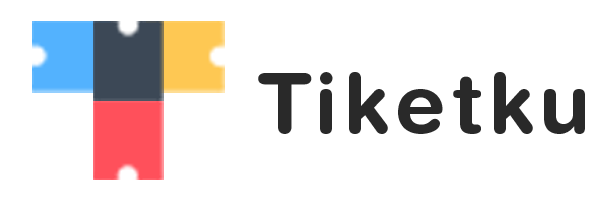
<style>
.page{position:relative;width:600px;height:200px;background:#ffffff}
.page>*{position:absolute;margin:0}
.t1{font:82.7px "HelveticaRounded-Bold";letter-spacing:0.075em;color:#292929}
</style>
<div class="page">
<p class="t1" style="left:258px;top:72px;width:327px;height:62px">Tiketku</p>
</div>
